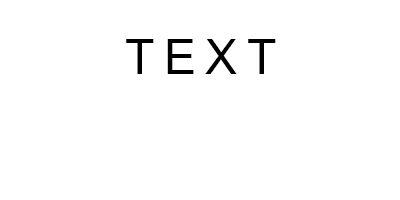
<style>
.page{position:relative;width:400px;height:200px;background:#ffffff}
.page>*{position:absolute;margin:0}
.t1{font:48px "ArialMT";letter-spacing:0.2em;color:#000000}
</style>
<div class="page">
<p class="t1" style="left:126px;top:39px;width:150px;height:35px">TEXT</p>
</div>
